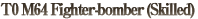
<style>
.page{position:relative;width:198px;height:19px;background:#ffffff}
.page>*{position:absolute;margin:0}
.t1{font:16px "RyuminPro-ExBold";letter-spacing:-0.095em;color:#4a3f32;font-weight:bold;scale:0.9 1}
</style>
<div class="page">
<p class="t1" style="left:0px;top:2px;width:195px;height:17px">T0 M64 Fighter-bomber (Skilled)</p>
</div>
